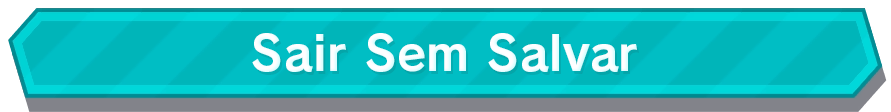
<style>
.page{position:relative;width:891px;height:112px}
.page>*{position:absolute;margin:0}
.t1{font:48px "RodinPro-B";color:#fffeff}
</style>
<div class="page">
<p class="t1" style="left:252px;top:33px;width:385px;height:39px">Sair Sem Salvar</p>
</div>
